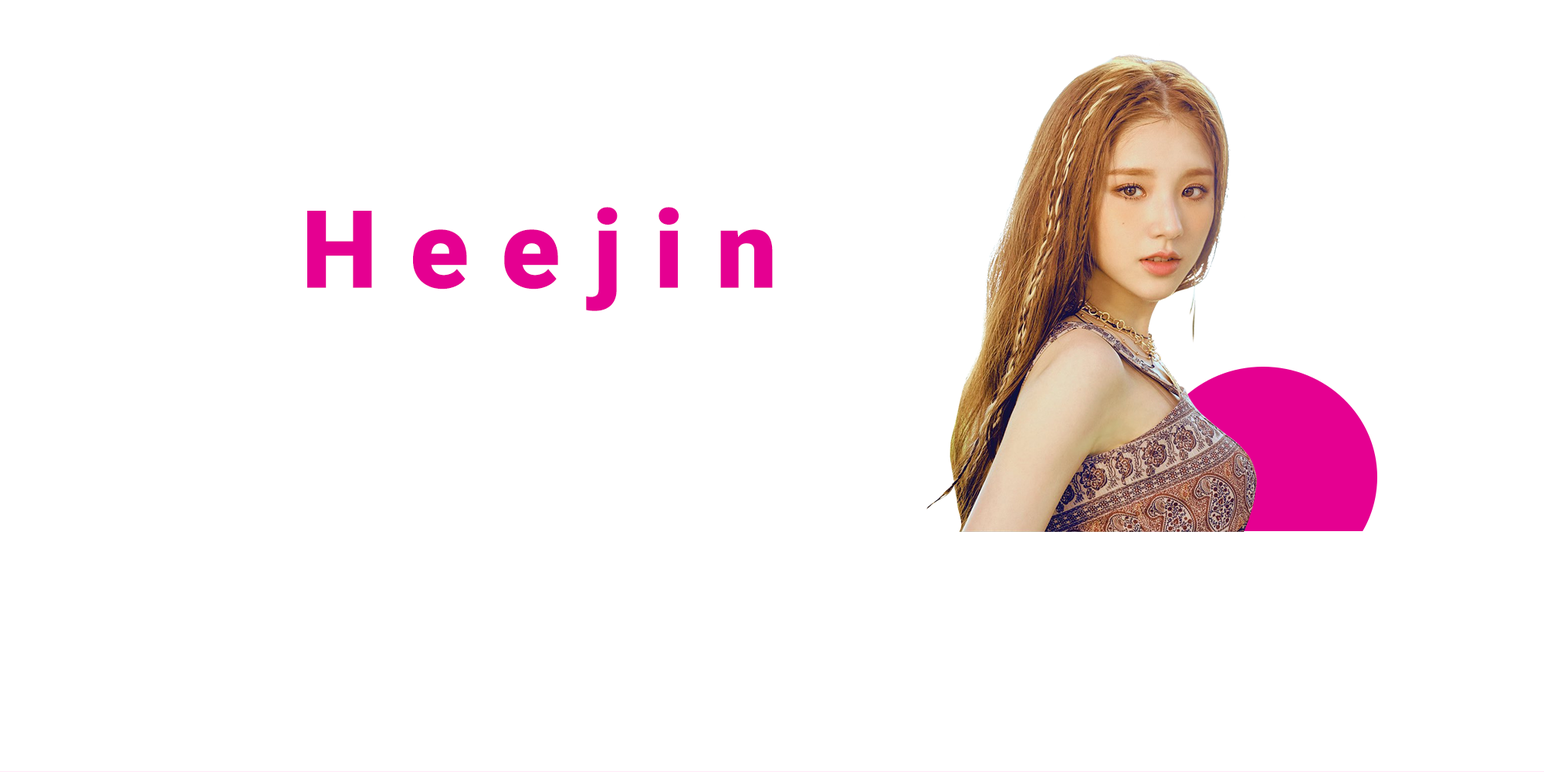
<style>
.page{position:relative;width:1544px;height:772px;background:#ffffff}
.page>*{position:absolute;margin:0}
.t1{font:108.1px "Roboto-Black";letter-spacing:0.3em;color:#e50091}
</style>
<div class="page">
<p class="t1" style="left:307px;top:207px;width:466px;height:104px">Heejin</p>
</div>
